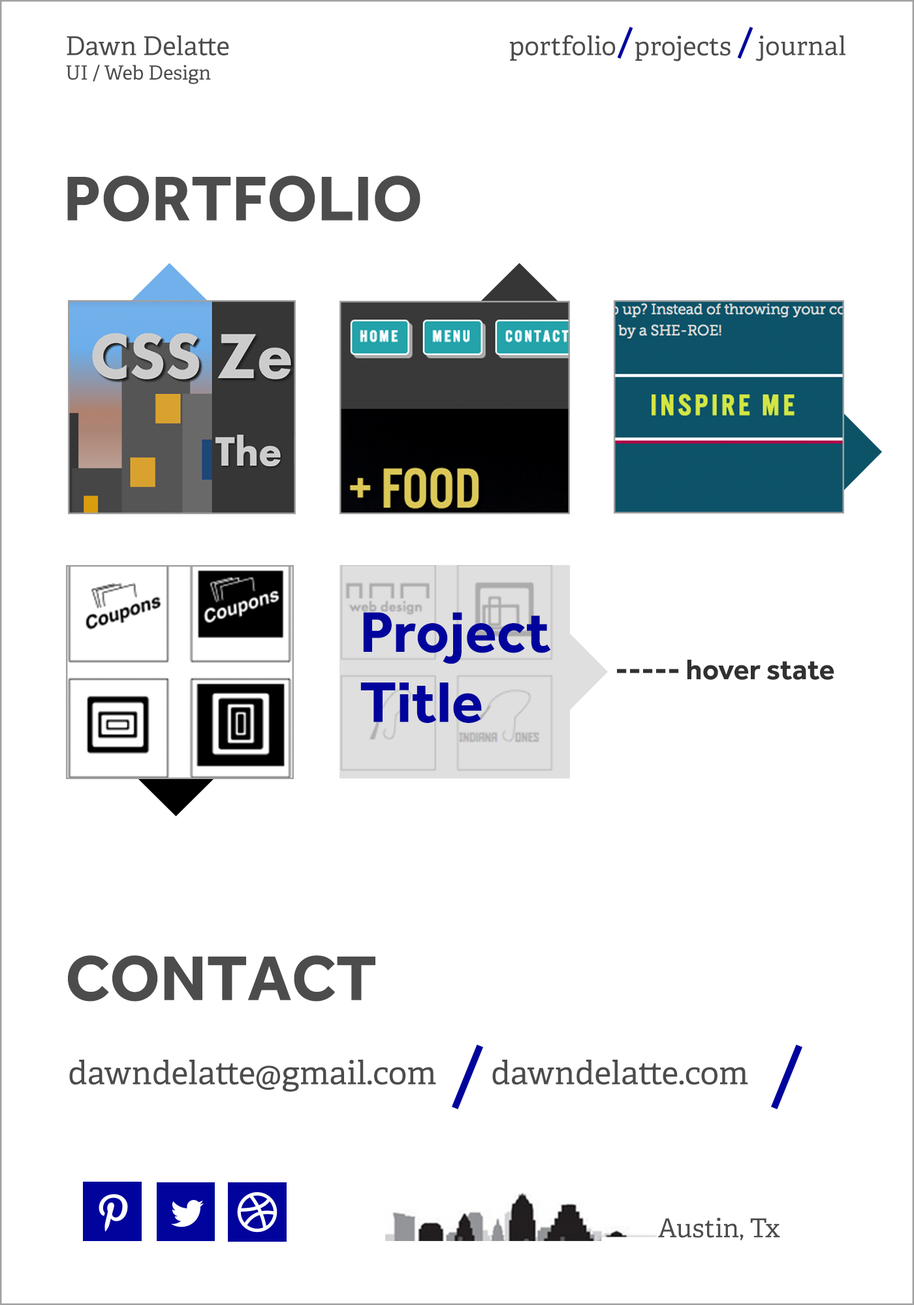
<style>
.page{position:relative;width:914px;height:1305px;background:#ffffff}
.page>*{position:absolute;margin:0}
.t1{font:26.1px "Adelle-Regular";color:#4d4c4c}
.t2{font:19.6px "Adelle-Regular";color:#4d4c4c}
.t3{font:65.3px "Effra-Bold";color:#4d4c4c}
.t4{font:59.2px/70.1px "Effra-Bold";color:#01049c}
.t5{font:29.4px/58.7px "Effra-Bold";color:#323131}
.t6{font:32.6px "Adelle-Regular";color:#4d4c4c}
</style>
<div class="page">
<p class="t1" style="left:67px;top:35px;width:162px;height:20px">Dawn Delatte</p>
<p class="t1" style="left:509px;top:35px;width:106px;height:26px">portfolio</p>
<p class="t1" style="left:634px;top:35px;width:96px;height:26px">projects</p>
<p class="t1" style="left:755px;top:35px;width:90px;height:26px">journal</p>
<p class="t2" style="left:66px;top:65px;width:145px;height:19px">UI / Web Design</p>
<p class="t3" style="left:67px;top:176px;width:353px;height:46px">PORTFOLIO</p>
<p class="t4" style="left:360px;top:612px;width:191px;height:111px">Project Title</p>
<p class="t5" style="left:617px;top:660px;width:217px;height:20px">----- hover state<br>        options</p>
<p class="t3" style="left:68px;top:955px;width:307px;height:47px">CONTACT</p>
<p class="t6" style="left:69px;top:1060px;width:367px;height:32px">dawndelatte@gmail.com</p>
<p class="t6" style="left:492px;top:1060px;width:256px;height:25px">dawndelatte.com</p>
<p class="t1" style="left:658px;top:1218px;width:122px;height:23px">Austin, Tx</p>
</div>
